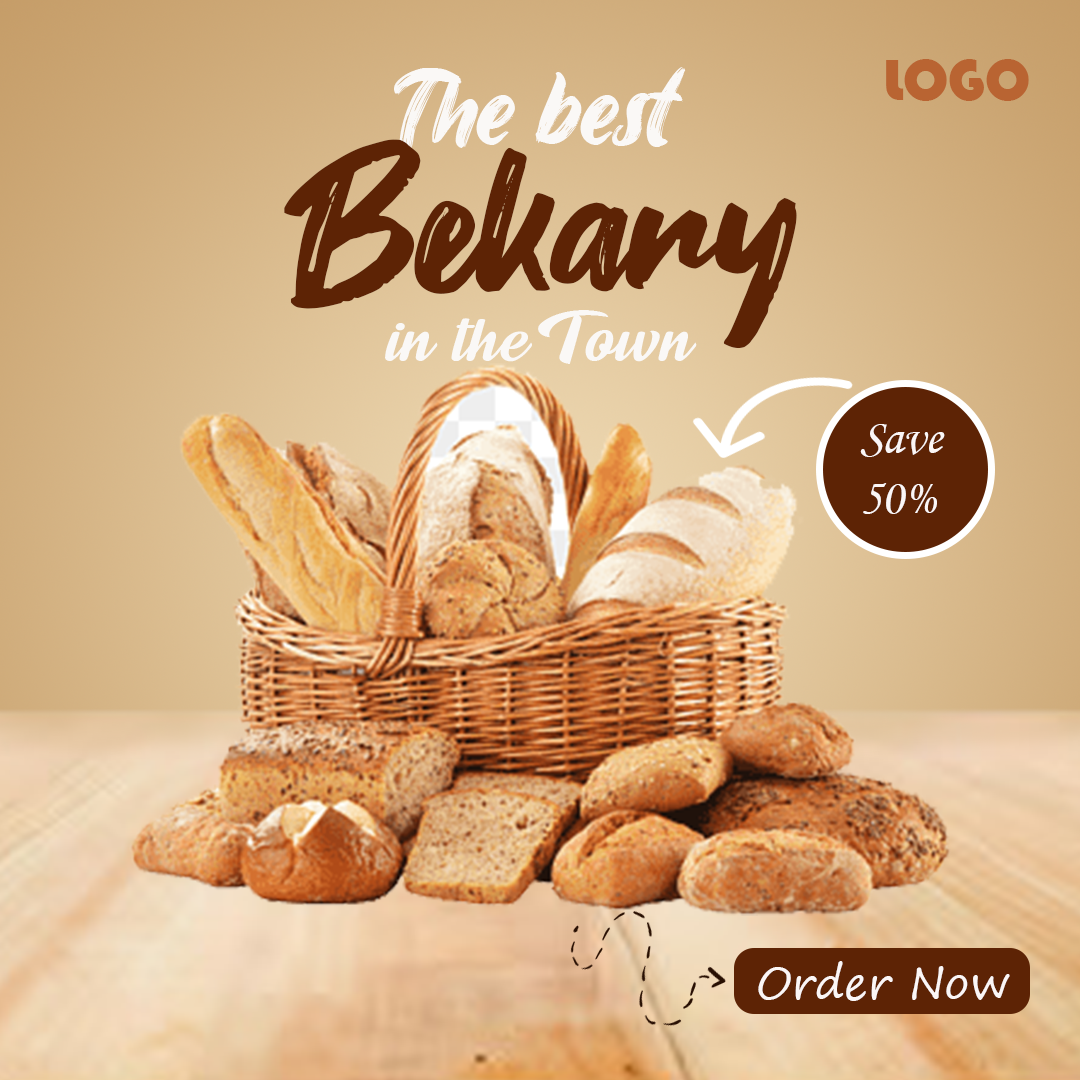
<style>
.page{position:relative;width:1080px;height:1080px}
.page>*{position:absolute;margin:0}
.t1{font:60px "Bauhaus93";color:#b96432}
.t2{font:100px "JamesStroker";color:#faf8f6}
.t3{font:200px "Fontjek";color:#5d2305}
.t4{font:100px "LemonJellyPersonalUse";color:#faf8f6}
.t5{font:50px "MonotypeCorsiva";color:#fbf6f6}
.t6{font:45px "SegoePrint";color:#fbf6f6}
</style>
<div class="page">
<p class="t1" style="left:886px;top:59px;width:143px;height:42px">LOGO</p>
<p class="t2" style="left:394px;top:67px;width:292px;height:85px">The best</p>
<p class="t3" style="left:284px;top:139px;width:513px;height:210px">Bekary</p>
<p class="t4" style="left:385px;top:310px;width:312px;height:54px">in the Town</p>
<p class="t5" style="left:860px;top:424px;width:85px;height:90px">Save<br>50%</p>
<p class="t6" style="left:758px;top:961px;width:252px;height:40px">Order Now</p>
</div>
